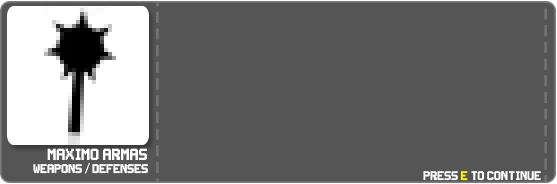
<style>
.page{position:relative;width:557px;height:184px;background:#555555}
.page>*{position:absolute;margin:0}
.t1{font:18px "Super-Smash-TV";color:#ffffff}
.t2{font:14px "Super-Smash-TV";color:#ffffff}
.t3{font:14px "MyriadPro-Regular";color:#ffffff}
</style>
<div class="page">
<p class="t1" style="left:47px;top:148px;width:100px;height:12px">Maximo Armas</p>
<p class="t2" style="left:33px;top:163px;width:115px;height:11px">Weapons <span class="t3">/</span> Defenses</p>
</div>
